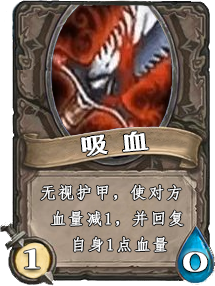
<style>
.page{position:relative;width:215px;height:286px}
.page>*{position:absolute;margin:0}
.t1{font:20.2px "HGYT_CNKI";letter-spacing:0.1em;color:#ffffff;font-weight:bold;scale:1.79 1}
.t2{font:16px/26px "FangSong";letter-spacing:0.1em;color:#ffffff;font-weight:bold}
.t3{font:28px "HGBZ_CNKI";letter-spacing:0.1em;color:#ffffff;font-weight:bold;scale:1.79 1}
</style>
<div class="page">
<p class="t1" style="left:81px;top:131px;width:68px;height:25px;rotate:-5deg">吸血</p>
<p class="t2" style="left:40px;top:184px;width:144px;height:68px">无视护甲，使对方<br> 血量减1，并回复<br>   自身1点血量</p>
<p class="t3" style="left:24px;top:249px;width:16px;height:20px">1</p>
<p class="t3" style="left:183px;top:252px;width:25px;height:20px">0</p>
</div>
